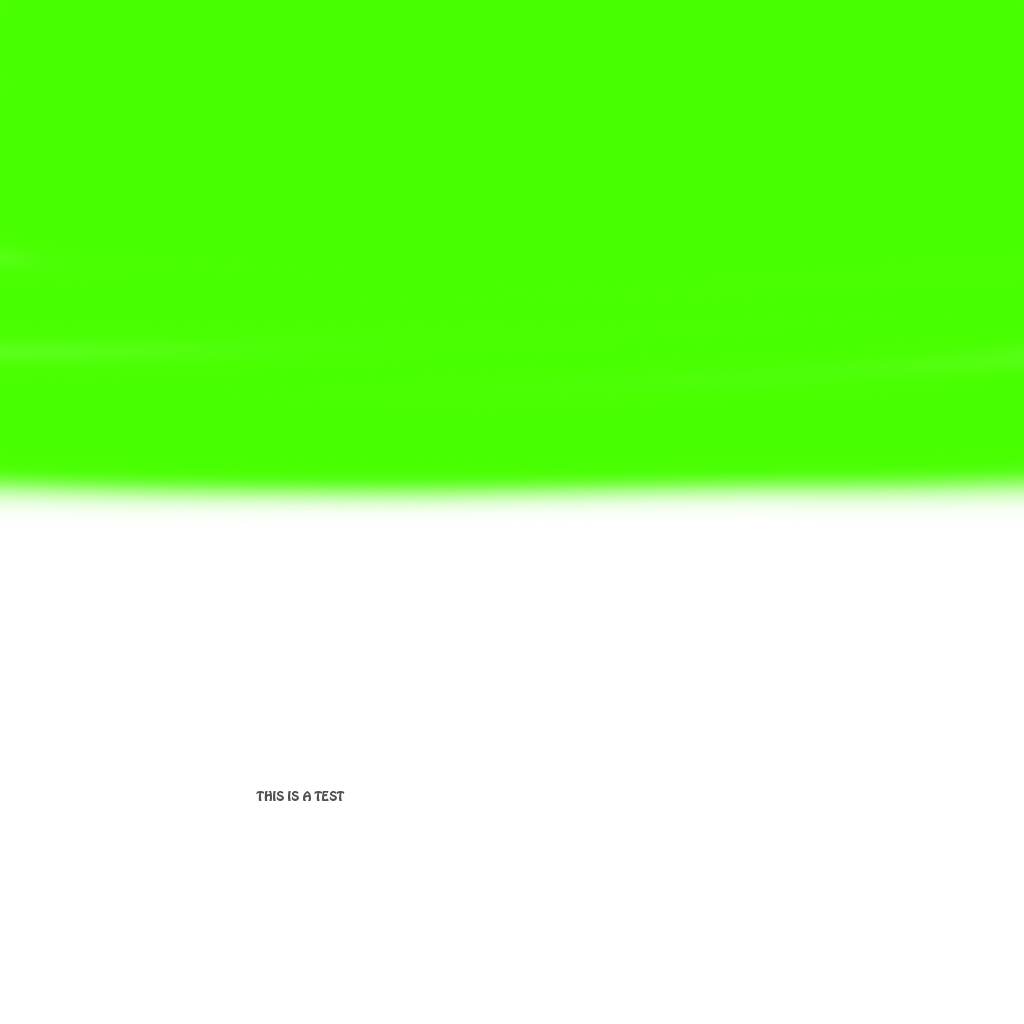
<style>
.page{position:relative;width:1024px;height:1024px;background:#ffffff}
.page>*{position:absolute;margin:0}
.t1{font:12px "HoboStd";color:#515353}
</style>
<div class="page">
<p class="t1" style="left:256px;top:791px;width:89px;height:10px">THIS IS A TEST</p>
</div>
